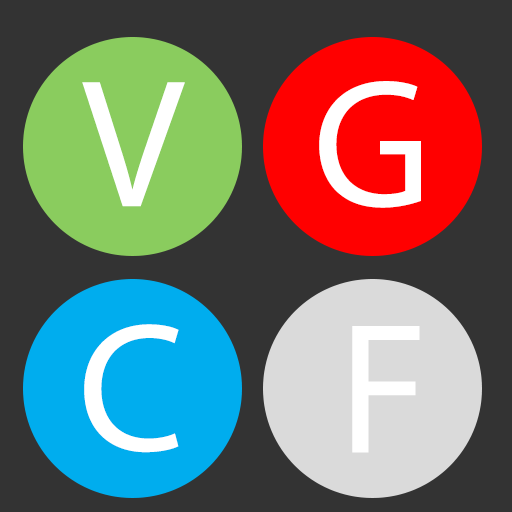
<style>
.page{position:relative;width:512px;height:512px;background:#333333}
.page>*{position:absolute;margin:0}
.t1{font:183.6px "MyriadPro-Regular";color:#ffffff}
.t2{font:187.2px "MyriadPro-Regular";color:#ffffff}
</style>
<div class="page">
<p class="t1" style="left:82px;top:82px;width:103px;height:125px">V</p>
<p class="t1" style="left:319px;top:81px;width:102px;height:127px">G</p>
<p class="t1" style="left:84px;top:324px;width:95px;height:129px">C</p>
<p class="t2" style="left:352px;top:326px;width:68px;height:127px">F</p>
</div>
